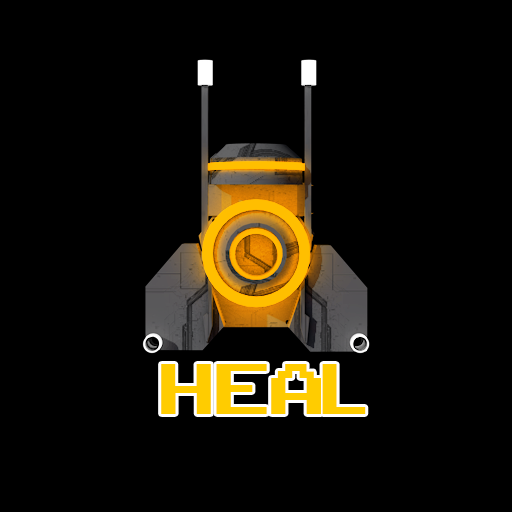
<style>
.page{position:relative;width:512px;height:512px;background:#000000}
.page>*{position:absolute;margin:0}
.t1{font:100px "ArcadeClassic";color:#ffcc00}
</style>
<div class="page">
<p class="t1" style="left:161px;top:364px;width:205px;height:50px">Heal</p>
</div>
